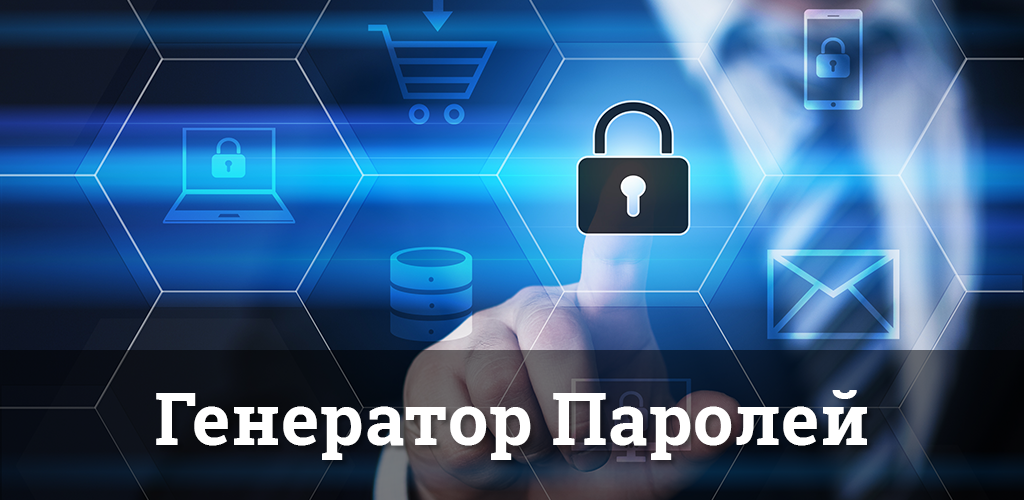
<style>
.page{position:relative;width:1024px;height:500px}
.page>*{position:absolute;margin:0}
.t1{font:72px "RobotoSlab-Bold";letter-spacing:0.01em;color:#ffffff}
</style>
<div class="page">
<p class="t1" style="left:156px;top:390px;width:711px;height:70px">Генератор Паролей</p>
</div>
